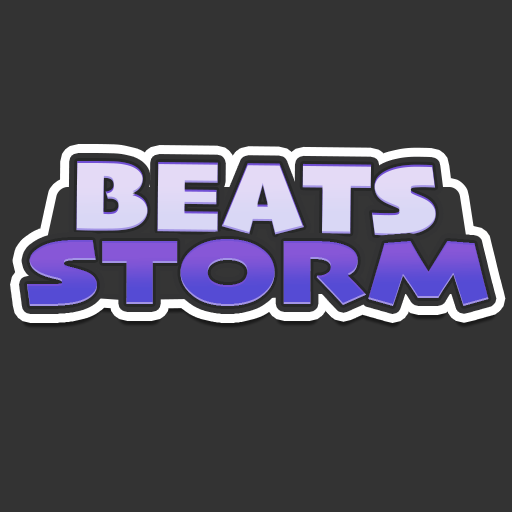
<style>
.page{position:relative;width:512px;height:512px;background:#333333}
.page>*{position:absolute;margin:0}
.t1{font:105.6px "Skia-Black";letter-spacing:0.025em;color:#ddd8f5;text-transform:uppercase}
.t2{font:97.3px "Skia-BlackExtended";letter-spacing:0.01em;text-transform:uppercase}
</style>
<div class="page">
<p class="t1" style="left:76px;top:161px;width:360px;height:75px;rotate:1deg">beats</p>
<p class="t2" style="left:27px;top:239px;width:462px;height:67px">storm</p>
</div>
